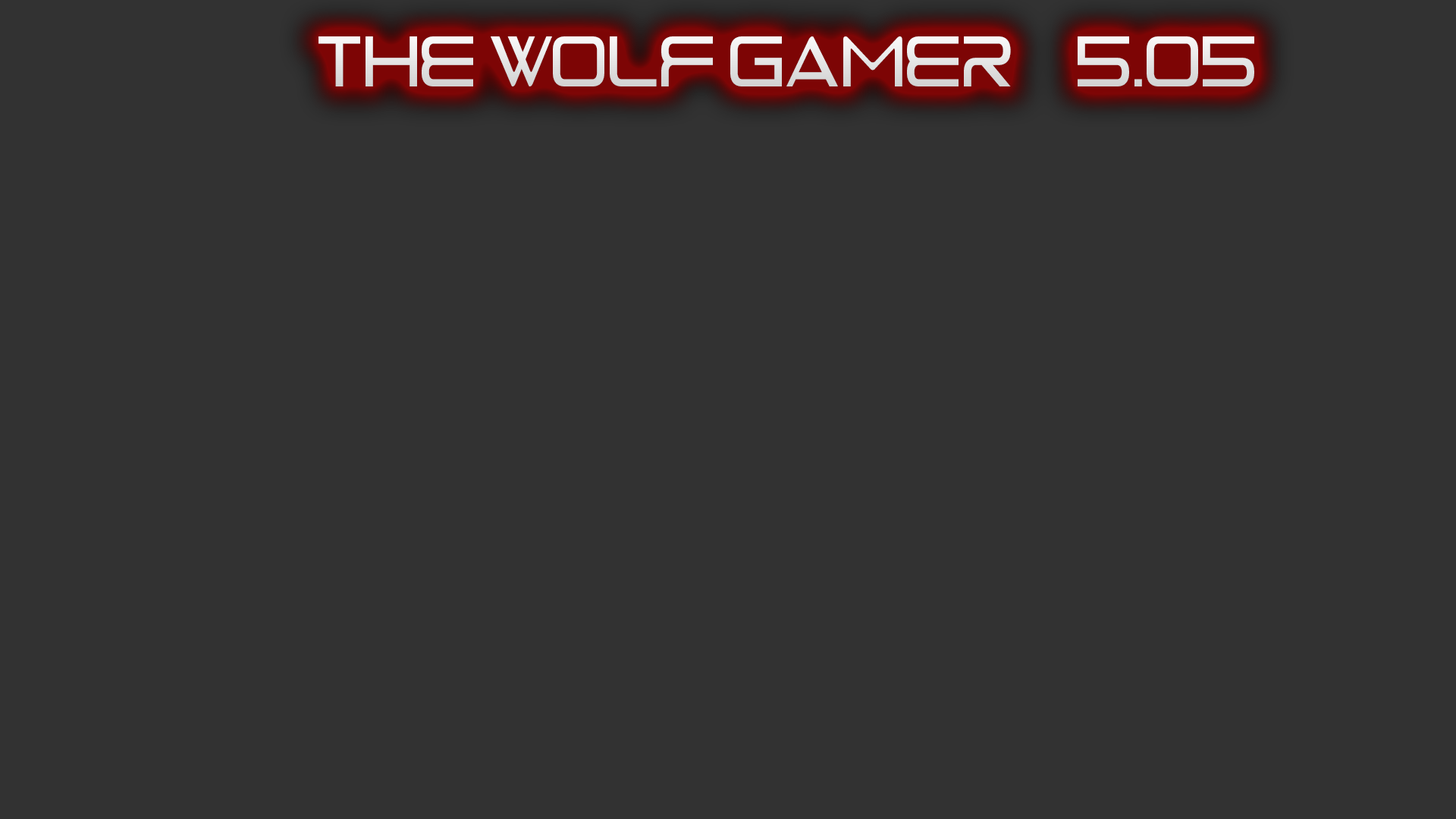
<style>
.page{position:relative;width:1456px;height:819px;background:#323232}
.page>*{position:absolute;margin:0}
.t1{font:73.2px "TheRaveIsInYourPants";color:#e6e6e6;scale:0.69 1}
</style>
<div class="page">
<p class="t1" style="left:318px;top:36px;width:936px;height:50px">THE WOLF GAMER     5.05</p>
</div>
